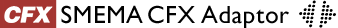
<style>
.page{position:relative;width:338px;height:28px;background:#ffffff}
.page>*{position:absolute;margin:0}
.t1{font:25px "GillSansMT";letter-spacing:0.025em;color:#010101}
</style>
<div class="page">
<p class="t1" style="left:61px;top:5px;width:228px;height:24px">SMEMA CFX Adaptor</p>
</div>
